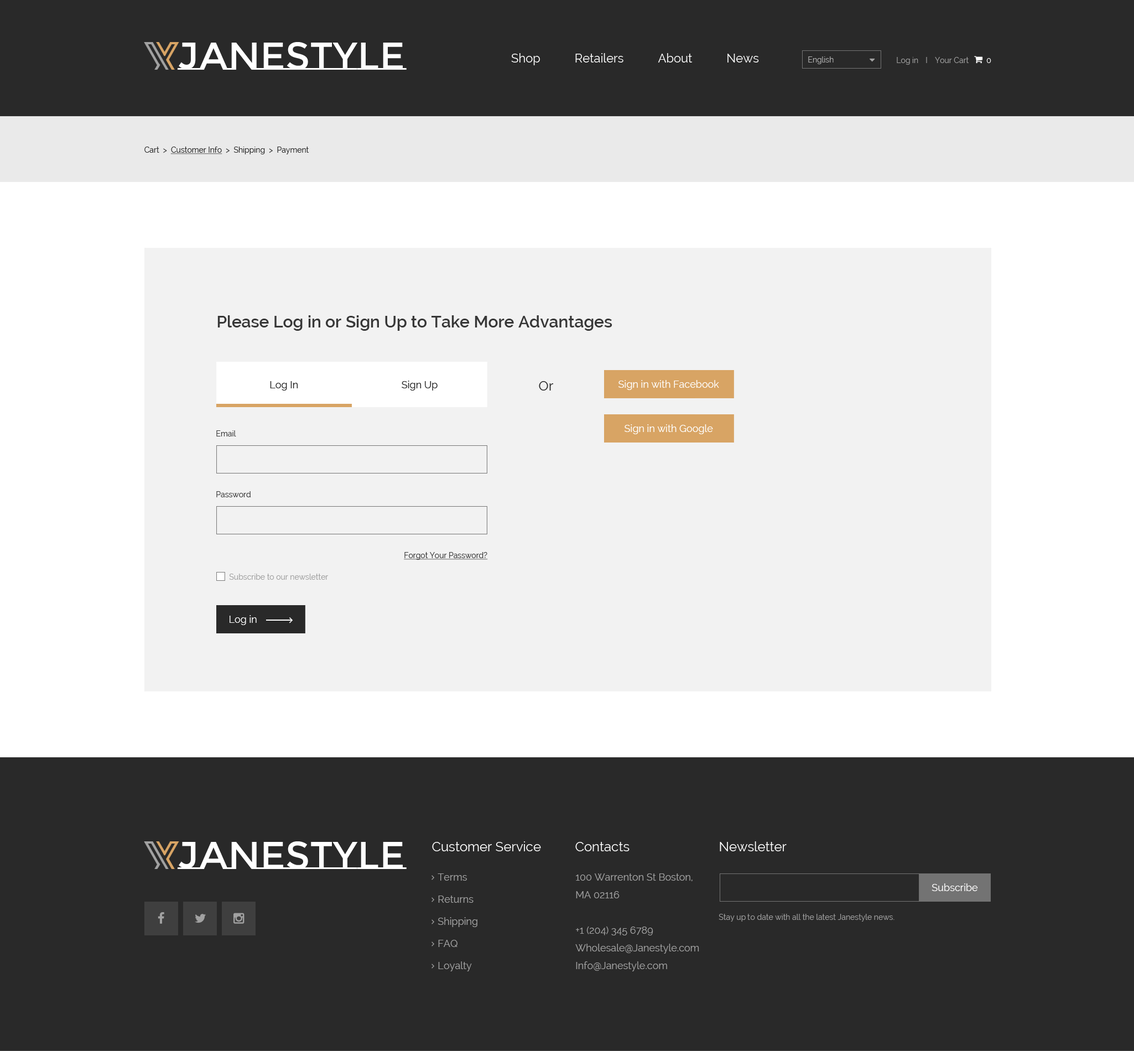
<style>
.page{position:relative;width:1134px;height:1051px;background:#292929}
.page>*{position:absolute;margin:0}
.t1{font:38.7px "MontserratSubrayada-Regular";color:#ffffff}
.t2{font:12.2px "Raleway";color:#ffffff}
.t3{font:7.7px "Raleway";color:#b3b3b3}
.t4{font:7.7px "Raleway";color:#a1a1a1}
.t5{font:7.7px "Raleway";color:#ffffff}
.t6{font:7.7px "Raleway";color:#292929}
.t7{font:7.7px "Raleway";color:#292929;text-decoration:underline}
.t8{font:16.6px "Raleway-SemiBold";color:#373737}
.t9{font:10px "Raleway";color:#292929}
.t10{font:13.3px "Raleway";color:#292929}
.t11{font:10px "Raleway";color:#ffffff}
.t12{font:7.7px "Raleway";color:#373737}
.t13{font:7.7px "Raleway";color:#373737;text-decoration:underline}
.t14{font:13.3px "Raleway";color:#ffffff}
.t15{font:10px/22.1px "Raleway";color:#a1a1a1}
.t16{font:10px/17.7px "Raleway";color:#a1a1a1}
.t17{font:10px "Raleway";color:#fffefe}
</style>
<div class="page">
<p class="t1" style="left:178px;top:42px;width:229px;height:28px">Janestyle</p>
<p class="t2" style="left:511px;top:53px;width:248px;height:12px">Shop           Retailers           About           News</p>
<p class="t3" style="left:808px;top:56px;width:26px;height:8px">English</p>
<p class="t4" style="left:897px;top:57px;width:21px;height:8px">Log in</p>
<p class="t4" style="left:935px;top:57px;width:34px;height:6px">Your Cart</p>
<p class="t5" style="left:987px;top:58px;width:5px;height:5px">0</p>
<p class="t6" style="left:144px;top:147px;width:165px;height:7px">Cart  &gt;  <span class="t7">Customer Info</span>  &gt;  Shipping  &gt;  Payment</p>
<p class="t8" style="left:217px;top:315px;width:396px;height:16px">Please Log in or Sign Up to Take More Advantages</p>
<p class="t9" style="left:270px;top:381px;width:28px;height:10px">Log In</p>
<p class="t9" style="left:402px;top:381px;width:36px;height:10px">Sign Up</p>
<p class="t10" style="left:539px;top:381px;width:15px;height:10px">Or</p>
<p class="t11" style="left:619px;top:380px;width:100px;height:10px">Sign in with Facebook</p>
<p class="t11" style="left:625px;top:424px;width:88px;height:10px">Sign in with Google</p>
<p class="t12" style="left:216px;top:430px;width:20px;height:7px">Email</p>
<p class="t12" style="left:216px;top:491px;width:35px;height:6px">Password</p>
<p class="t13" style="left:404px;top:552px;width:84px;height:8px">Forgot Your Password?</p>
<p class="t4" style="left:229px;top:574px;width:99px;height:6px">Subscribe to our newsletter</p>
<p class="t11" style="left:230px;top:615px;width:27px;height:10px">Log in</p>
<p class="t1" style="left:178px;top:842px;width:229px;height:27px">Janestyle</p>
<p class="t14" style="left:432px;top:842px;width:109px;height:10px">Customer Service</p>
<p class="t14" style="left:575px;top:842px;width:55px;height:10px">Contacts</p>
<p class="t14" style="left:720px;top:842px;width:67px;height:10px">Newsletter</p>
<p class="t15" style="left:438px;top:874px;width:40px;height:98px">Terms<br>Returns<br>Shipping<br>FAQ<br>Loyalty</p>
<p class="t16" style="left:575px;top:874px;width:124px;height:98px">100 Warrenton St Boston, <br>MA 02116<br><br>+1 (204) 345 6789<br>Wholesale@Janestyle.com<br>Info@Janestyle.com</p>
<p class="t17" style="left:932px;top:884px;width:46px;height:7px">Subscribe</p>
<p class="t4" style="left:719px;top:914px;width:176px;height:8px">Stay up to date with all the latest Janestyle news.</p>
</div>
